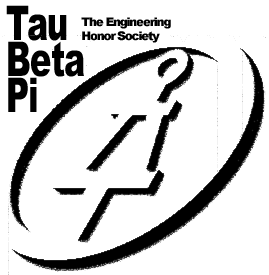
<style>
.page{position:relative;width:269px;height:275px;background:#ffffff}
.page>*{position:absolute;margin:0}
.t1{font:48px/36px "Arial-Black";letter-spacing:-0.025em;color:#000000;scale:0.67 1}
.t2{font:12px "Arial-Black";letter-spacing:-0.1em;color:#000000}
</style>
<div class="page">
<p class="t1" style="left:6px;top:5px;width:78px;height:107px">Tau<br>Beta<br>Pi</p>
<p class="t2" style="left:81px;top:17px;width:90px;height:26px">The Engineering<br>Honor Society</p>
</div>
